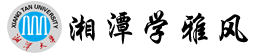
<style>
.page{position:relative;width:255px;height:55px;background:#ffffff}
.page>*{position:absolute;margin:0}
.t1{font:36px "STXingkai";letter-spacing:0.1em;color:#020202;scale:0.95 1}
</style>
<div class="page">
<p class="t1" style="left:69px;top:10px;width:179px;height:35px">湘潭学雅风</p>
</div>
